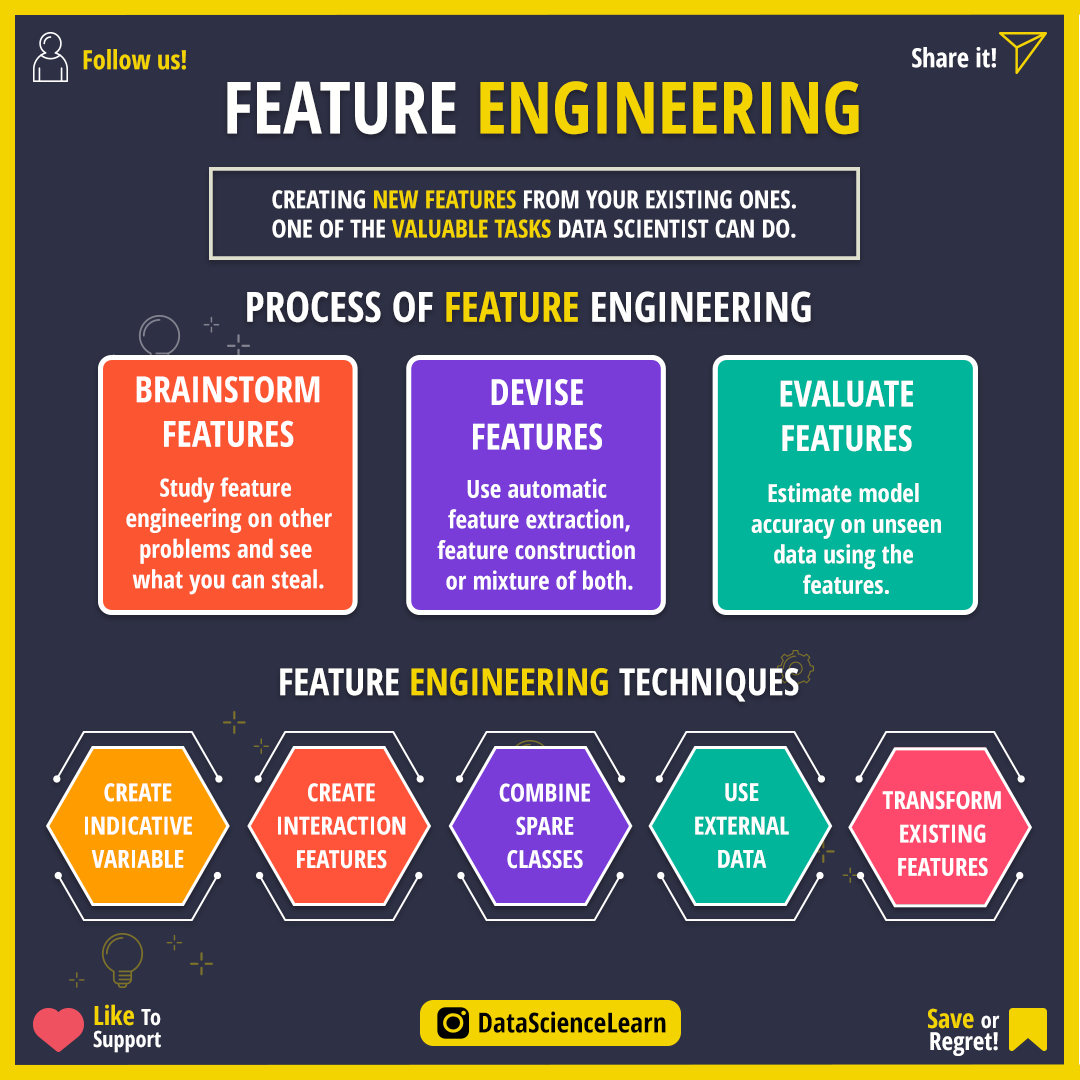
<style>
.page{position:relative;width:1080px;height:1080px;background:#2e3045}
.page>*{position:absolute;margin:0}
.t1{font:26.4px "OpenSans-CondensedBold";color:#f3d400}
.t2{font:26.4px "OpenSans-CondensedBold";color:#ffffff}
.t3{font:72.2px "OpenSans-CondensedBold";color:#f3d400}
.t4{font:72.2px "OpenSans-CondensedBold";color:#fffffe}
.t5{font:25px/29.2px "OpenSans-CondensedBold";color:#ffffff}
.t6{font:25px/29.2px "OpenSans-CondensedBold";color:#f3d400}
.t7{font:41.7px "OpenSans-CondensedBold";color:#fefefe}
.t8{font:41.7px "OpenSans-CondensedBold";color:#ffffff}
.t9{font:41.7px "OpenSans-CondensedBold";color:#f3d400}
.t10{font:36.1px/44.4px "OpenSans-CondensedBold";color:#ffffff}
.t11{font:25px/30.6px "OpenSans-CondensedBold";color:#ffffff}
.t12{font:37.5px "OpenSans-CondensedBold";color:#f3d400}
.t13{font:37.5px "OpenSans-CondensedBold";color:#fffffe}
.t14{font:37.5px "OpenSans-CondensedBold";color:#ffffff}
.t15{font:25px/33.3px "OpenSans-CondensedBold";color:#ffffff}
.t16{font:22.2px/22.2px "OpenSans-CondensedBold";color:#ffffff}
.t17{font:26.4px/22.2px "OpenSans-CondensedBold";color:#f3d400}
.t18{font:27.8px "OpenSans-CondensedBold";color:#000000}
.t19{font:25px/22.2px "OpenSans-CondensedBold";color:#ffffff}
</style>
<div class="page">
<p class="t1" style="left:83px;top:49px;width:103px;height:21px">Follow us!</p>
<p class="t2" style="left:912px;top:47px;width:84px;height:21px">Share it!</p>
<p class="t3" style="left:227px;top:81px;width:632px;height:54px"><span class="t4">FEATURE </span>ENGINEERING</p>
<p class="t5" style="left:272px;top:190px;width:524px;height:48px">CREATING <span class="t6">NEW FEATURES</span> FROM YOUR EXISTING ONES. <br>ONE OF THE <span class="t6">VALUABLE TASKS</span> DATA SCIENTIST CAN DO.</p>
<p class="t7" style="left:247px;top:291px;width:564px;height:32px"><span class="t8">PROCESS OF </span><span class="t9">FEATURE </span>ENGINEERING</p>
<p class="t10" style="left:136px;top:376px;width:184px;height:71px;text-align:center">BRAINSTORM<br>FEATURES</p>
<p class="t10" style="left:473px;top:379px;width:129px;height:71px;text-align:center">DEVISE<br>FEATURES</p>
<p class="t10" style="left:780px;top:380px;width:133px;height:72px;text-align:center">EVALUATE<br>FEATURES</p>
<p class="t11" style="left:126px;top:477px;width:206px;height:118px;text-align:center">Study feature <br>engineering on other<br>problems and see <br>what you can steal.</p>
<p class="t11" style="left:437px;top:478px;width:198px;height:112px;text-align:center">Use automatic <br>feature extraction,<br>feature construction <br>or mixture of both.</p>
<p class="t11" style="left:751px;top:483px;width:190px;height:111px;text-align:center">Estimate model <br>accuracy on unseen<br>data using the <br>features.</p>
<p class="t12" style="left:280px;top:668px;width:519px;height:34px"><span class="t13">FEATURE</span> ENGINEERING <span class="t14">TECHNIQUES</span></p>
<p class="t15" style="left:85px;top:783px;width:107px;height:85px;text-align:center">CREATE<br>INDICATIVE<br>VARIABLE</p>
<p class="t15" style="left:278px;top:783px;width:128px;height:86px;text-align:center">CREATE<br>INTERACTION<br>FEATURES</p>
<p class="t15" style="left:499px;top:783px;width:91px;height:86px;text-align:center">COMBINE<br>SPARE<br>CLASSES</p>
<p class="t15" style="left:695px;top:783px;width:94px;height:85px;text-align:center">USE<br>EXTERNAL<br>DATA</p>
<p class="t15" style="left:882px;top:791px;width:119px;height:85px;text-align:center">TRANSFORM<br>EXISTING<br>FEATURES</p>
<p class="t16" style="left:93px;top:1004px;width:68px;height:49px"><span class="t17">Like </span>To<br>Support</p>
<p class="t18" style="left:479px;top:1011px;width:187px;height:22px">DataScienceLearn</p>
<p class="t19" style="left:928px;top:1008px;width:72px;height:48px;text-align:right"><span class="t17">Save </span><span class="t16">or<br></span>Regret!</p>
</div>
